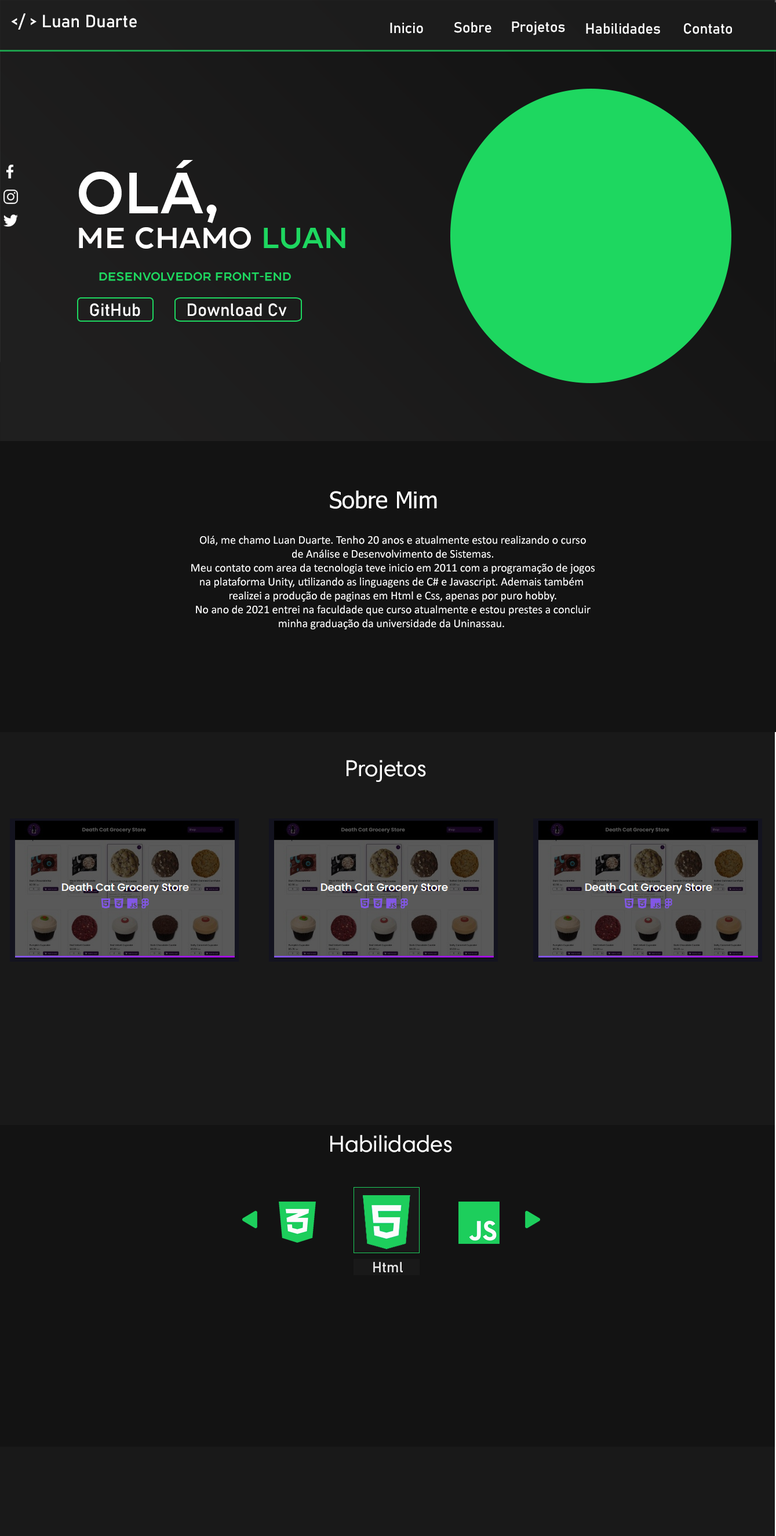
<style>
.page{position:relative;width:776px;height:1536px;background:#131313}
.page>*{position:absolute;margin:0}
.t1{font:17.4px "Bahnschrift";color:#ffffff}
.t2{font:14.5px "Bahnschrift";color:#ffffff}
.t3{font:29px "ConneqtRegular";color:#ffffff}
.t4{font:58px "ConneqtRegular";color:#ffffff}
.t5{font:29px "ConneqtRegular";color:#1ed760}
.t6{font:11.6px "ConneqtRegular";color:#1ed760}
.t7{font:23.2px "Tahoma";color:#ffffff}
.t8{font:11.6px "Calibri";color:#ffffff}
.t9{font:23.2px "HarmoniaSansProCyr-Regular";color:#ffffff}
.t10{font:14.5px "Bahnschrift";color:#eaeaea}
</style>
<div class="page">
<p class="t1" style="left:11px;top:13px;width:126px;height:17px">&lt;/ &gt; Luan Duarte</p>
<p class="t2" style="left:390px;top:23px;width:33px;height:11px">Inicio</p>
<p class="t2" style="left:454px;top:22px;width:38px;height:11px">Sobre</p>
<p class="t2" style="left:512px;top:21px;width:53px;height:14px">Projetos</p>
<p class="t2" style="left:586px;top:23px;width:74px;height:11px">Habilidades</p>
<p class="t2" style="left:684px;top:23px;width:48px;height:11px">Contato</p>
<p class="t3" style="left:79px;top:160px;width:267px;height:89px"><span class="t4">OLÁ,<br></span>ME CHAMO <span class="t5">LUAN</span></p>
<p class="t6" style="left:99px;top:272px;width:192px;height:9px">Desenvolvedor Front-End</p>
<p class="t1" style="left:90px;top:303px;width:50px;height:14px">GitHub</p>
<p class="t1" style="left:188px;top:303px;width:99px;height:14px">Download Cv</p>
<p class="t7" style="left:330px;top:490px;width:107px;height:19px">Sobre Mim</p>
<p class="t8" style="left:191px;top:536px;width:404px;height:94px;text-align:center">Olá, me chamo Luan Duarte. Tenho 20 anos e atualmente estou realizando o curso<br>de Análise e Desenvolvimento de Sistemas.<br>Meu contato com area da tecnologia teve inicio em 2011 com a programação de jogos<br>na plataforma Unity, utilizando as linguagens de C# e Javascript. Ademais também <br>realizei a produção de paginas em Html e Css, apenas por puro hobby.<br>No ano de 2021 entrei na faculdade que curso atualmente e estou prestes a concluir<br>minha graduação da universidade da Uninassau.</p>
<p class="t9" style="left:347px;top:760px;width:79px;height:22px">Projetos</p>
<p class="t9" style="left:330px;top:1135px;width:122px;height:17px">Habilidades</p>
<p class="t10" style="left:373px;top:1262px;width:30px;height:10px">Html</p>
</div>
